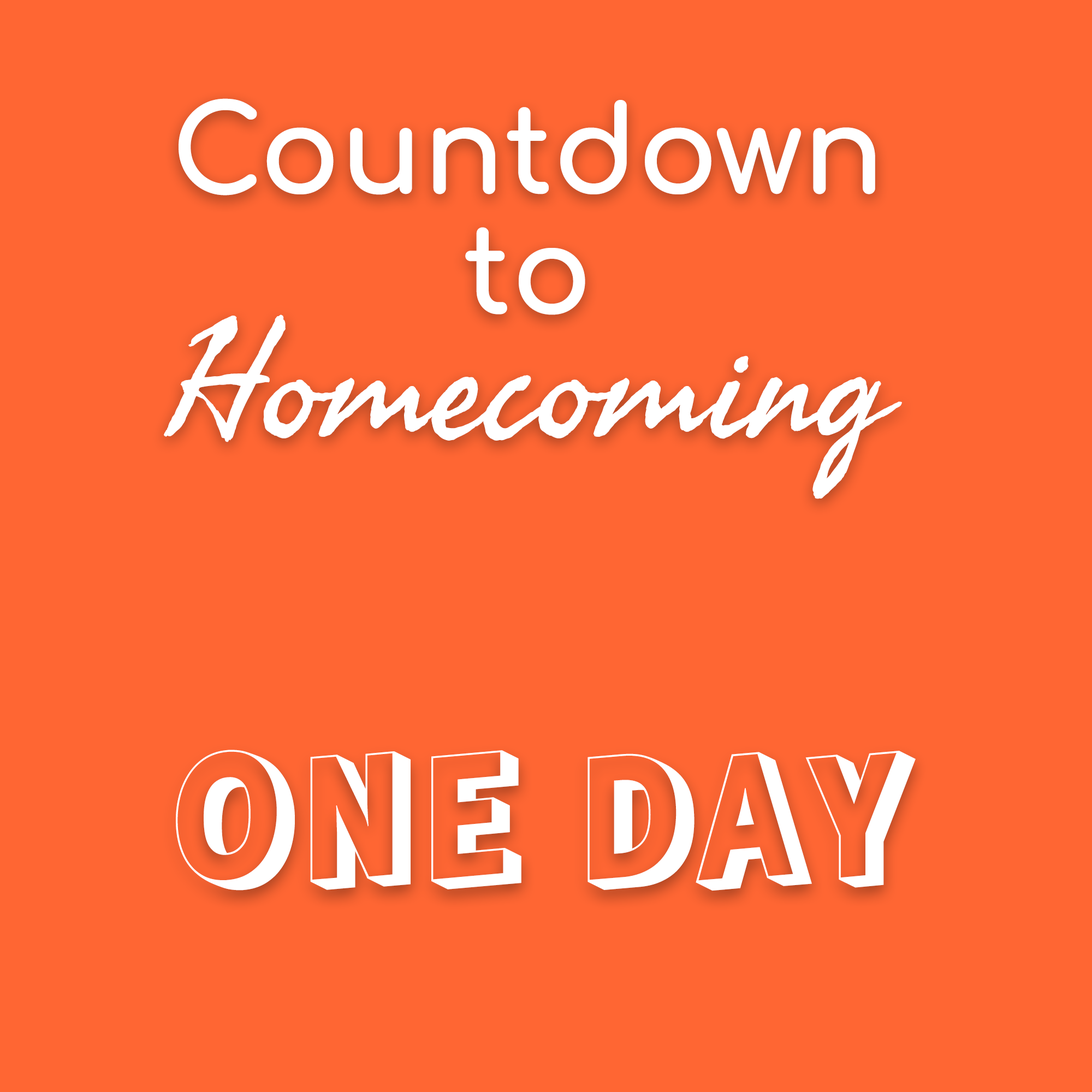
<style>
.page{position:relative;width:1092px;height:1092px;background:#ff6633}
.page>*{position:absolute;margin:0}
.t1{font:120.3px/120.3px "Comfortaa-Bold";color:#ffffff}
.t2{font:160.3px/120.3px "SeaweedScript-Regular";color:#ffffff}
.t3{font:163.8px "RampartOne-Regular";color:#ffffff}
</style>
<div class="page">
<p class="t1" style="left:164px;top:98px;width:738px;height:401px;text-align:center">Countdown<br>to<br><span class="t2">Homecoming</span></p>
<p class="t3" style="left:176px;top:750px;width:740px;height:141px">ONE DAY</p>
</div>
